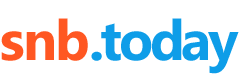
<style>
.page{position:relative;width:240px;height:80px;background:#ffffff}
.page>*{position:absolute;margin:0}
.t1{font:56px "SegoeUI-Bold";letter-spacing:-0.06em;color:#0e9de8}
.t2{font:56px "SegoeUI-Bold";letter-spacing:-0.025em;color:#ff5722}
</style>
<div class="page">
<p class="t1" style="left:1px;top:18px;width:238px;height:56px"><span class="t2">snb</span>.today</p>
</div>
